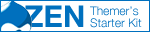
<style>
.page{position:relative;width:150px;height:32px;background:#ffffff}
.page>*{position:absolute;margin:0}
.t1{font:30px "HelveticaNeue-Bold";color:#0070be}
.t2{font:12px/12px "HelveticaNeue-Light";color:#0070be}
</style>
<div class="page">
<p class="t1" style="left:24px;top:5px;width:60px;height:22px">ZEN</p>
<p class="t2" style="left:90px;top:6px;width:52px;height:22px">Themer’s <br>Starter Kit</p>
</div>
